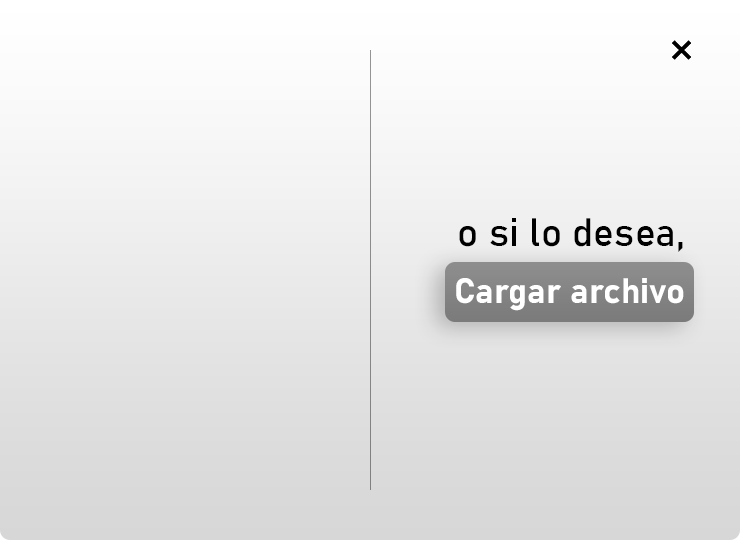
<style>
.page{position:relative;width:740px;height:540px}
.page>*{position:absolute;margin:0}
.t1{font:39px "Bahnschrift";color:#000000;font-weight:bold}
.t2{font:35px "Bahnschrift-Bold";color:#ffffff;font-weight:bold}
.t3{font:35px "Bahnschrift-Bold";color:#000000;font-weight:bold}
</style>
<div class="page">
<p class="t1" style="left:459px;top:218px;width:224px;height:34px">o si lo desea,</p>
<p class="t2" style="left:456px;top:278px;width:228px;height:33px"><span class="t3"><br></span>Cargar archivo</p>
</div>
